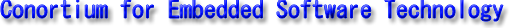
<style>
.page{position:relative;width:510px;height:28px;background:#ffffff}
.page>*{position:absolute;margin:0}
.t1{font:24px "MS-Gothic"}
</style>
<div class="page">
<p class="t1" style="left:1px;top:0px;width:502px;height:21px">Conortium for Embedded Software Technology</p>
</div>
